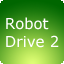
<style>
.page{position:relative;width:64px;height:64px}
.page>*{position:absolute;margin:0}
.t1{font:14.9px "Verdana";color:#ffffff}
</style>
<div class="page">
<p class="t1" style="left:6px;top:17px;width:53px;height:31px">Robot<br>Drive 2</p>
</div>
